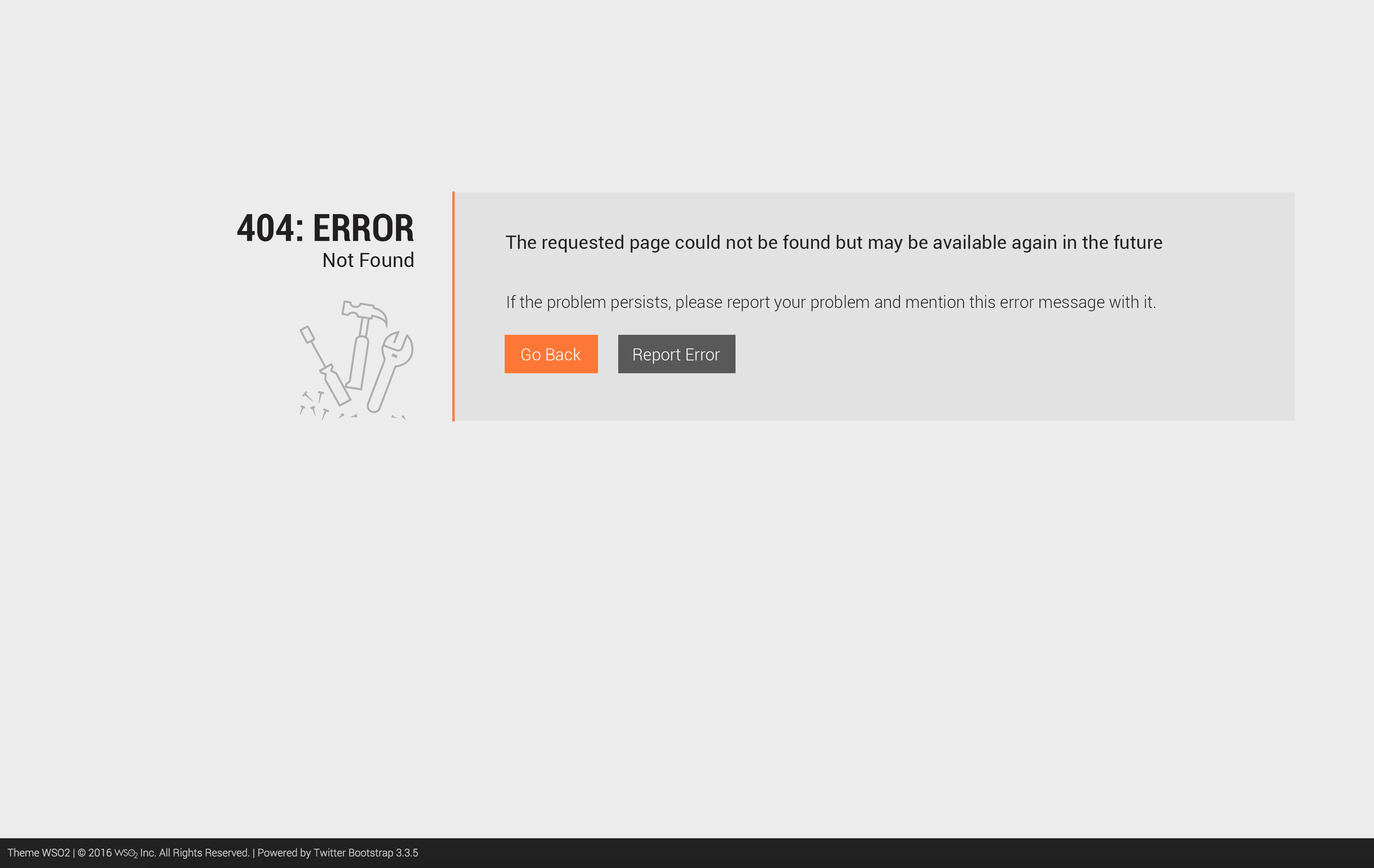
<style>
.page{position:relative;width:1374px;height:868px;background:#ececec}
.page>*{position:absolute;margin:0}
.t1{font:37.1px "Roboto-BoldCondensed";color:#211f1f;text-transform:uppercase}
.t2{font:18.6px "Roboto-Regular";color:#211f1f}
.t3{font:19.8px "Roboto-Regular";color:#211f1f}
.t4{font:16.5px "Roboto-Light";color:#211f1f}
.t5{font:16.5px "Roboto-Light";color:#ffffff}
</style>
<div class="page">
<p class="t1" style="left:237px;top:214px;width:177px;height:27px">404: Error</p>
<p class="t2" style="left:506px;top:235px;width:657px;height:17px">The requested page could not be found but may be available again in the future</p>
<p class="t3" style="left:324px;top:252px;width:90px;height:15px">Not Found</p>
<p class="t4" style="left:508px;top:295px;width:648px;height:16px">If the problem persists, please report your problem and mention this error message with it.</p>
<p class="t5" style="left:521px;top:347px;width:60px;height:13px">Go Back</p>
<p class="t5" style="left:634px;top:348px;width:86px;height:16px">Report Error</p>
</div>
